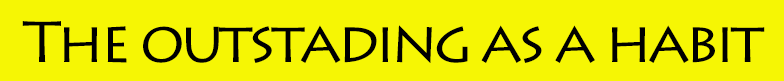
<style>
.page{position:relative;width:784px;height:81px;background:#f6f604}
.page>*{position:absolute;margin:0}
.t1{font:58.3px "LithosPro-Regular";letter-spacing:-0.075em;color:#000000}
</style>
<div class="page">
<p class="t1" style="left:22px;top:21px;width:743px;height:42px">The outstading as a habit</p>
</div>
